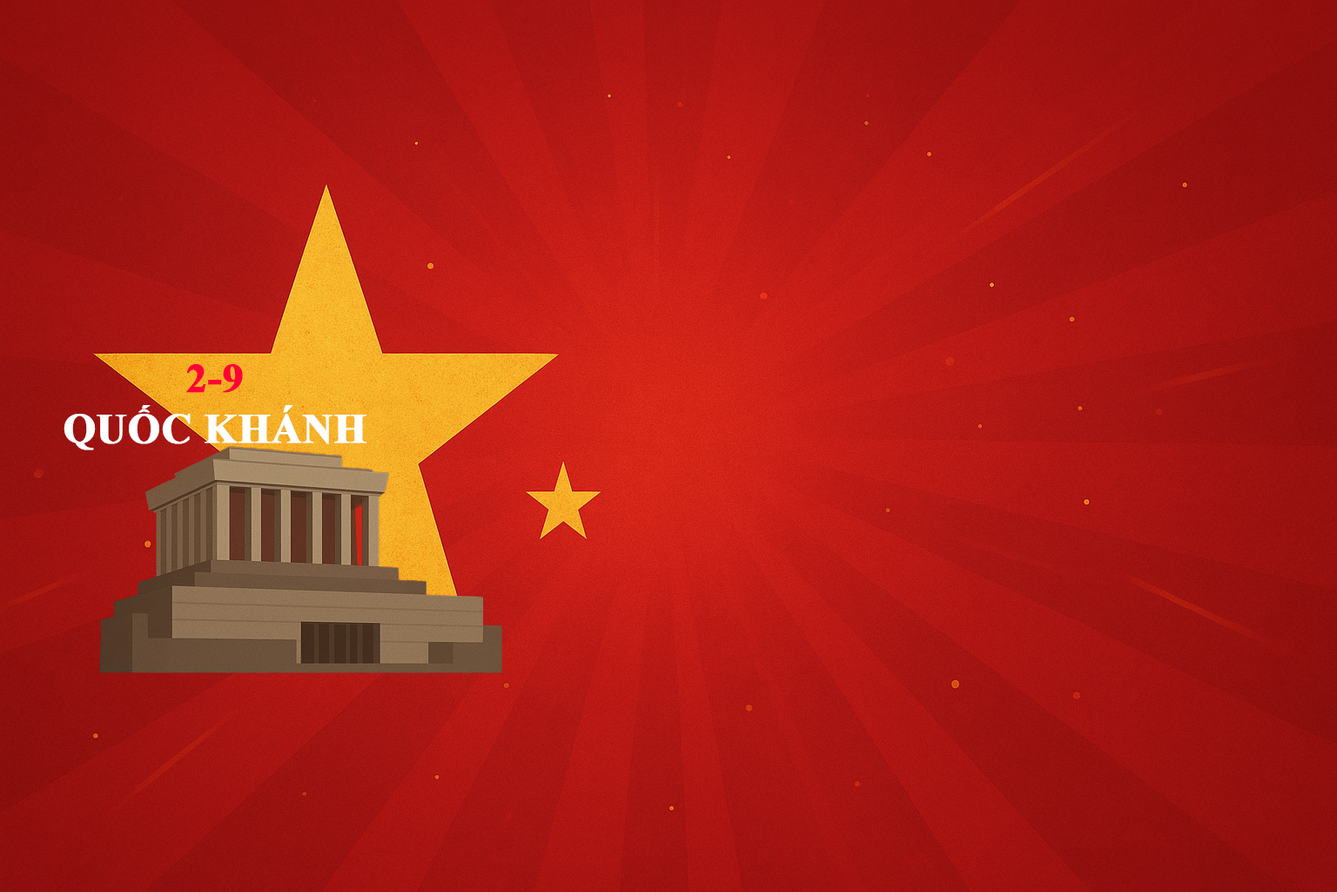
<style>
.page{position:relative;width:1337px;height:892px}
.page>*{position:absolute;margin:0}
.t1{font:41.8px "TimesNewRomanPS-BoldMT";color:#ffffff;text-transform:uppercase;font-weight:bold}
.t2{font:41.8px "TimesNewRomanPS-BoldMT";color:#ff0037;text-transform:uppercase;font-weight:bold}
</style>
<div class="page">
<p class="t1" style="left:64px;top:364px;width:303px;height:86px;text-align:center"><span class="t2">2-9<br></span>Quốc Khánh</p>
</div>
